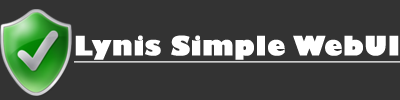
<style>
.page{position:relative;width:400px;height:100px;background:#333333}
.page>*{position:absolute;margin:0}
.t1{font:26px "GillSans-UltraBold";color:#ffffff;font-weight:bold;text-decoration:underline}
</style>
<div class="page">
<p class="t1" style="left:74px;top:35px;width:327px;height:28px">Lynis Simple WebUI</p>
</div>
